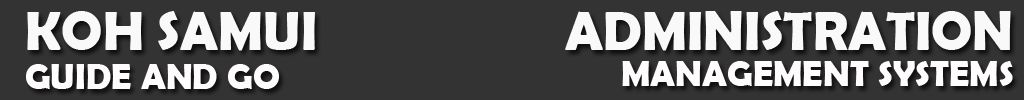
<style>
.page{position:relative;width:1024px;height:100px;background:#333333}
.page>*{position:absolute;margin:0}
.t1{font:55px "BerlinSansFBDemi-Bold";color:#faf9f9}
.t2{font:36px "BerlinSansFBDemi-Bold";color:#fefcfc}
</style>
<div class="page">
<p class="t1" style="left:27px;top:11px;width:288px;height:40px">KOH SAMUI</p>
<p class="t1" style="left:565px;top:11px;width:446px;height:40px">ADMINISTRATION</p>
<p class="t2" style="left:26px;top:64px;width:253px;height:26px">GUIDE AND GO</p>
<p class="t2" style="left:622px;top:61px;width:391px;height:26px">MANAGEMENT SYSTEMS</p>
</div>
